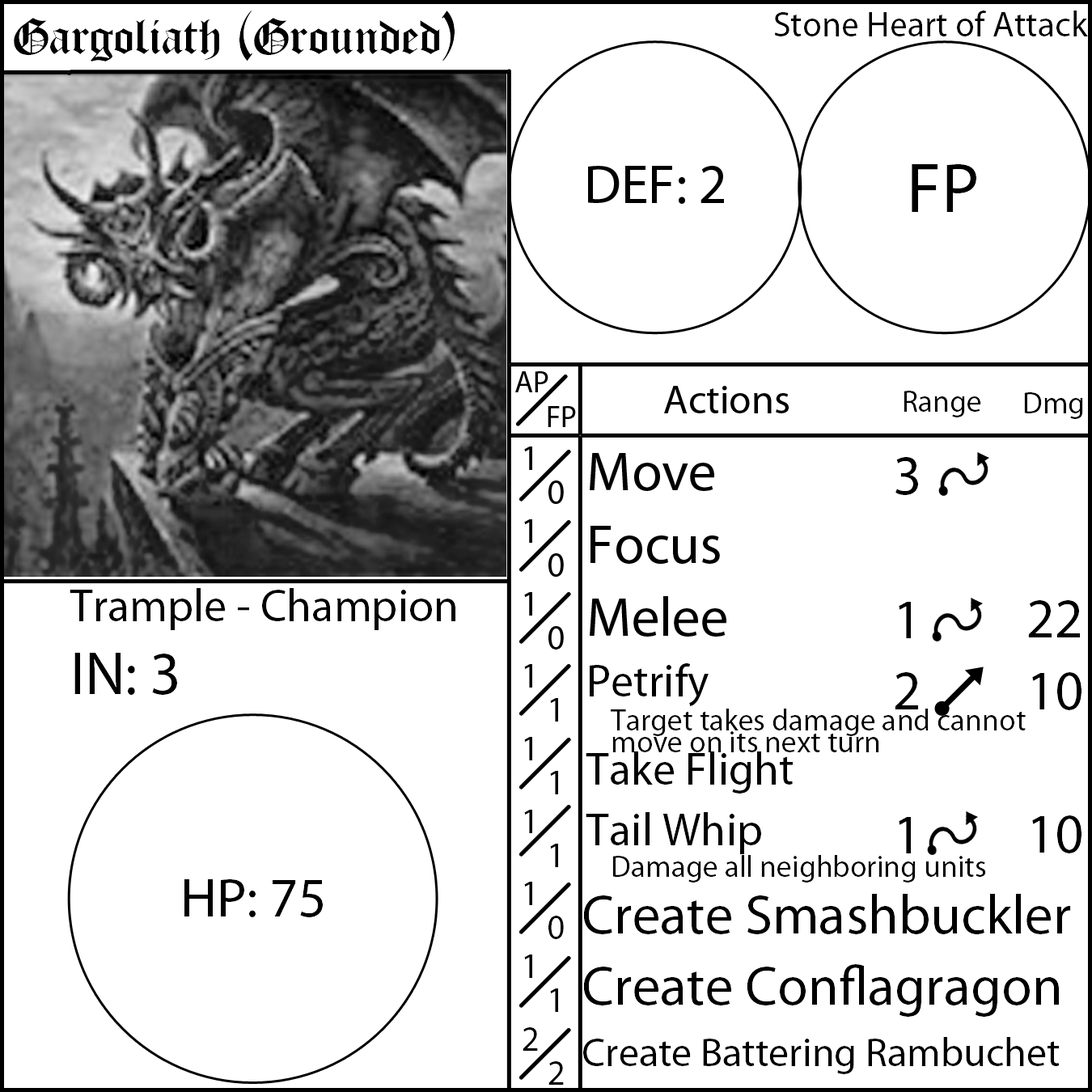
<style>
.page{position:relative;width:1092px;height:1092px;background:#ffffff}
.page>*{position:absolute;margin:0}
.t1{font:55.6px "OldLondon";color:#000000}
.t2{font:35.4px "MyriadPro-Regular";color:#000000}
.t3{font:55.6px "MyriadPro-Regular";color:#000000}
.t4{font:70.8px "MyriadPro-Regular";color:#000000}
.t5{font:30.3px "MyriadPro-Regular";color:#000000}
.t6{font:40.4px "MyriadPro-Regular";color:#000000}
.t7{font:45.5px "MyriadPro-Regular";color:#000000}
.t8{font:60.7px "MyriadPro-Regular";color:#000000}
</style>
<div class="page">
<p class="t1" style="left:14px;top:11px;width:441px;height:50px">Gargoliath (Grounded)</p>
<p class="t2" style="left:774px;top:11px;width:314px;height:25px">Stone Heart of Attack</p>
<p class="t3" style="left:588px;top:166px;width:136px;height:38px">DEF: 2</p>
<p class="t4" style="left:912px;top:164px;width:64px;height:48px">FP</p>
<p class="t5" style="left:515px;top:371px;width:33px;height:21px">AP</p>
<p class="t6" style="left:664px;top:386px;width:125px;height:27px">Actions</p>
<p class="t5" style="left:904px;top:391px;width:77px;height:26px">Range</p>
<p class="t5" style="left:1024px;top:392px;width:59px;height:27px">Dmg</p>
<p class="t5" style="left:548px;top:406px;width:28px;height:21px">FP</p>
<p class="t2" style="left:523px;top:447px;width:15px;height:604px">1<br>1<br>1<br>1<br>1<br>1<br>1<br>1<br>2</p>
<p class="t5" style="left:583px;top:453px;width:488px;height:621px"><span class="t3">Move<br>Focus<br>Melee<br></span><span class="t7">Petrify</span><br> Target takes damage and cannot  <br> move on its next turn<br><span class="t7">Take Flight<br>Tail Whip<br></span> Damage all neighboring units<br><span class="t3">Create Smashbuckler<br>Create Conflagragon<br></span><span class="t6">Create Battering Rambuchet</span></p>
<p class="t3" style="left:895px;top:457px;width:23px;height:396px;text-align:center">3<br><br>1<br>2<br><br>1</p>
<p class="t2" style="left:548px;top:480px;width:16px;height:605px">0<br>0<br>0<br>1<br>1<br>1<br>0<br>1<br>2</p>
<p class="t7" style="left:70px;top:588px;width:385px;height:107px">Trample - Champion<br><span class="t8">IN: 3</span></p>
<p class="t3" style="left:1028px;top:600px;width:53px;height:253px;text-align:center">22<br>10<br><br>10</p>
<p class="t3" style="left:184px;top:879px;width:139px;height:38px">HP: 75</p>
</div>
